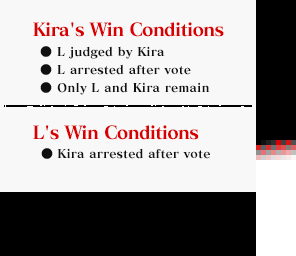
<style>
.page{position:relative;width:296px;height:256px;background:#f8f8f8}
.page>*{position:absolute;margin:0}
.t1{font:18px/103px "MatissePro-EB";letter-spacing:-0.05em;color:#d80000}
.t2{font:12px/18px "MatissePro-EB";letter-spacing:0.01em;color:#101010}
.t3{font:12px "MatissePro-EB";letter-spacing:0.01em;color:#101010}
</style>
<div class="page">
<p class="t1" style="left:33px;top:22px;width:191px;height:118px">Kira's Win Conditions<br>L's Win Conditions</p>
<p class="t2" style="left:57px;top:46px;width:153px;height:49px">L judged by Kira<br>L arrested after vote<br>Only L and Kira remain</p>
<p class="t3" style="left:57px;top:148px;width:153px;height:11px">Kira arrested after vote</p>
</div>
